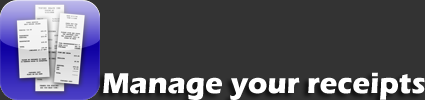
<style>
.page{position:relative;width:425px;height:100px;background:#333333}
.page>*{position:absolute;margin:0}
.t1{font:29.7px "ErasITC-Bold";color:#ffffff}
</style>
<div class="page">
<p class="t1" style="left:103px;top:72px;width:322px;height:28px">Manage your receipts</p>
</div>
